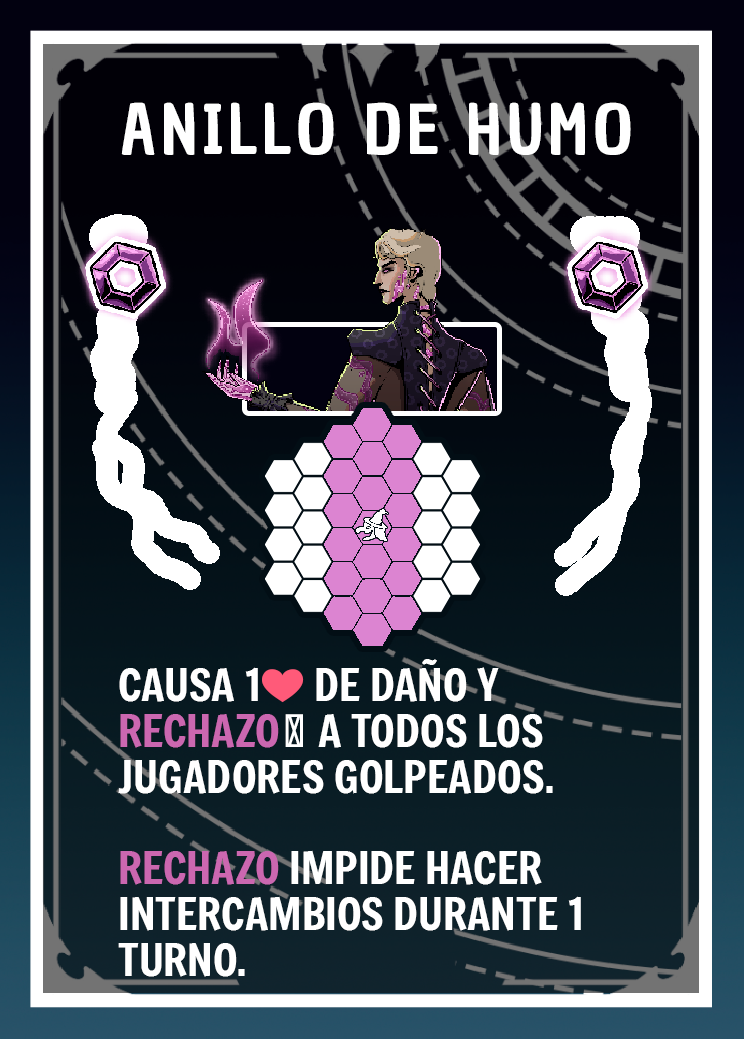
<style>
.page{position:relative;width:744px;height:1039px}
.page>*{position:absolute;margin:0}
.t1{font:66.7px "ChauPhilomeneOne-Regular";letter-spacing:0.075em;color:#ffffff}
.t2{font:43.7px/45.8px "Freeman-Regular";color:#ffffff}
.t3{font:43.7px/45.8px "EmojiOneColor";color:#ffffff}
.t4{font:43.7px/45.8px "Freeman-Regular";color:#cb67b0}
</style>
<div class="page">
<p class="t1" style="left:121px;top:102px;width:510px;height:53px">ANILLO DE HUMO</p>
<p class="t2" style="left:118px;top:659px;width:463px;height:318px">CAUSA 1<span class="t3">❤️</span> DE DAÑO Y <span class="t4">RECHAZO</span>🌀 A TODOS LOS JUGADORES GOLPEADOS.<br><br><span class="t4">RECHAZO </span>IMPIDE HACER INTERCAMBIOS DURANTE 1 TURNO.</p>
</div>
